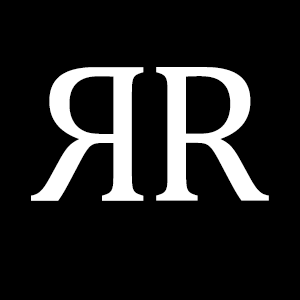
<style>
.page{position:relative;width:300px;height:300px;background:#000000}
.page>*{position:absolute;margin:0}
.t1{font:199.9px "CambriaMath";color:#ffffff}
.t2{font:200px "CambriaMath";color:#ffffff}
</style>
<div class="page">
<p class="t1" style="left:31px;top:67px;width:113px;height:134px;rotate:180deg">R</p>
<p class="t2" style="left:156px;top:67px;width:113px;height:134px">R</p>
</div>
